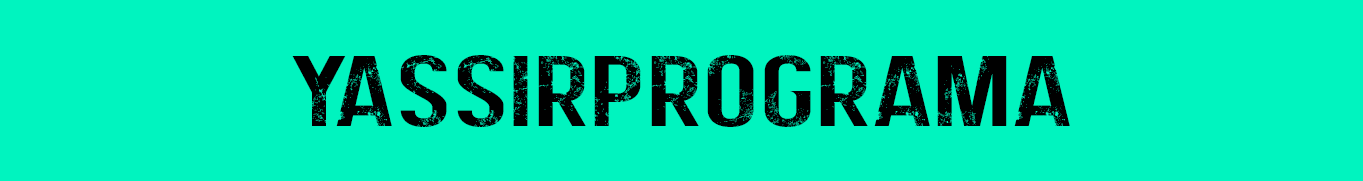
<style>
.page{position:relative;width:1363px;height:181px;background:#00f4bf}
.page>*{position:absolute;margin:0}
.t1{font:100px "EliteHackerCorroded";color:#000000}
</style>
<div class="page">
<p class="t1" style="left:292px;top:55px;width:778px;height:72px">YASSIRPROGRAMA</p>
</div>
